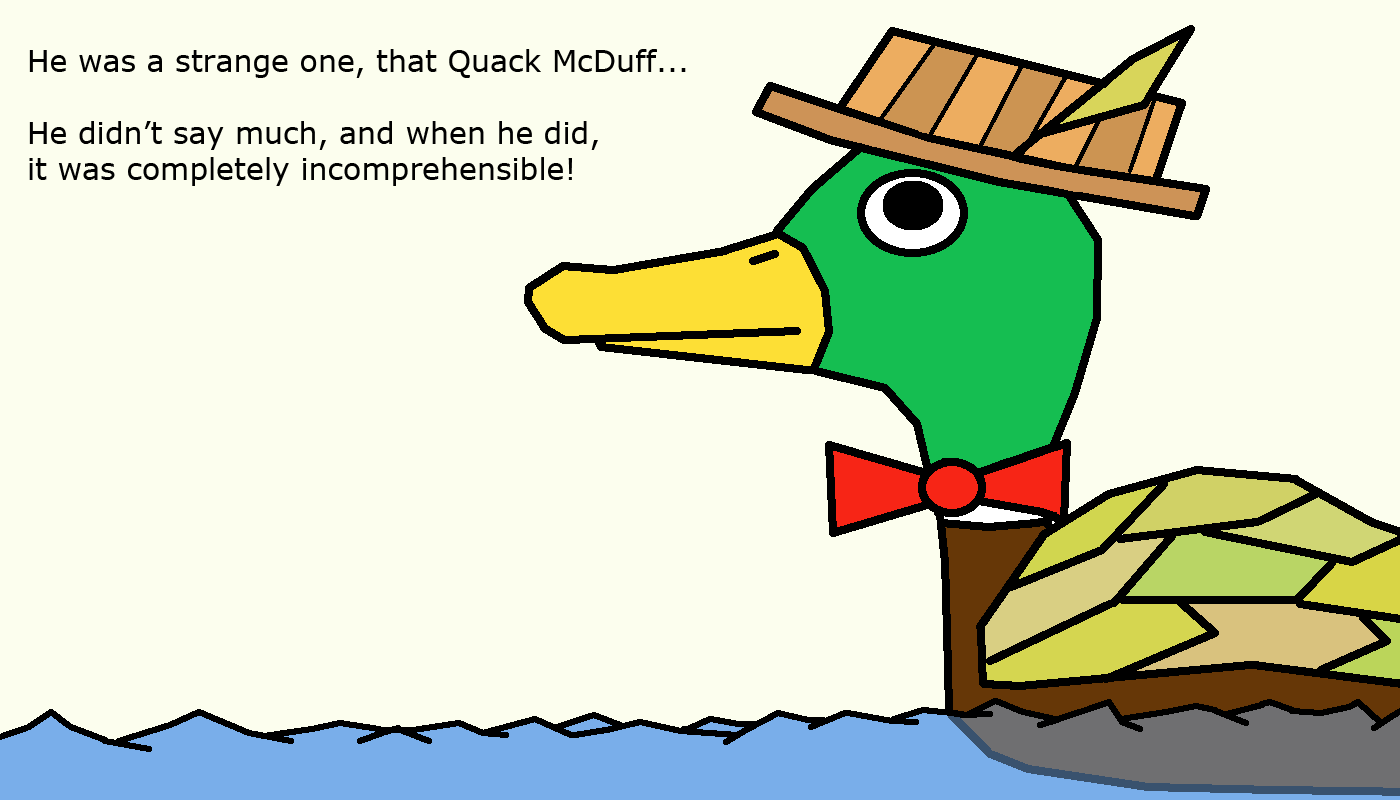
<style>
.page{position:relative;width:1400px;height:800px;background:#fcfeee}
.page>*{position:absolute;margin:0}
.t1{font:30px "Verdana";color:#000000}
</style>
<div class="page">
<p class="t1" style="left:29px;top:49px;width:657px;height:137px">He was a strange one, that Quack McDuff...<br><br>He didn’t say much, and when he did,<br>it was completely incomprehensible!</p>
</div>
